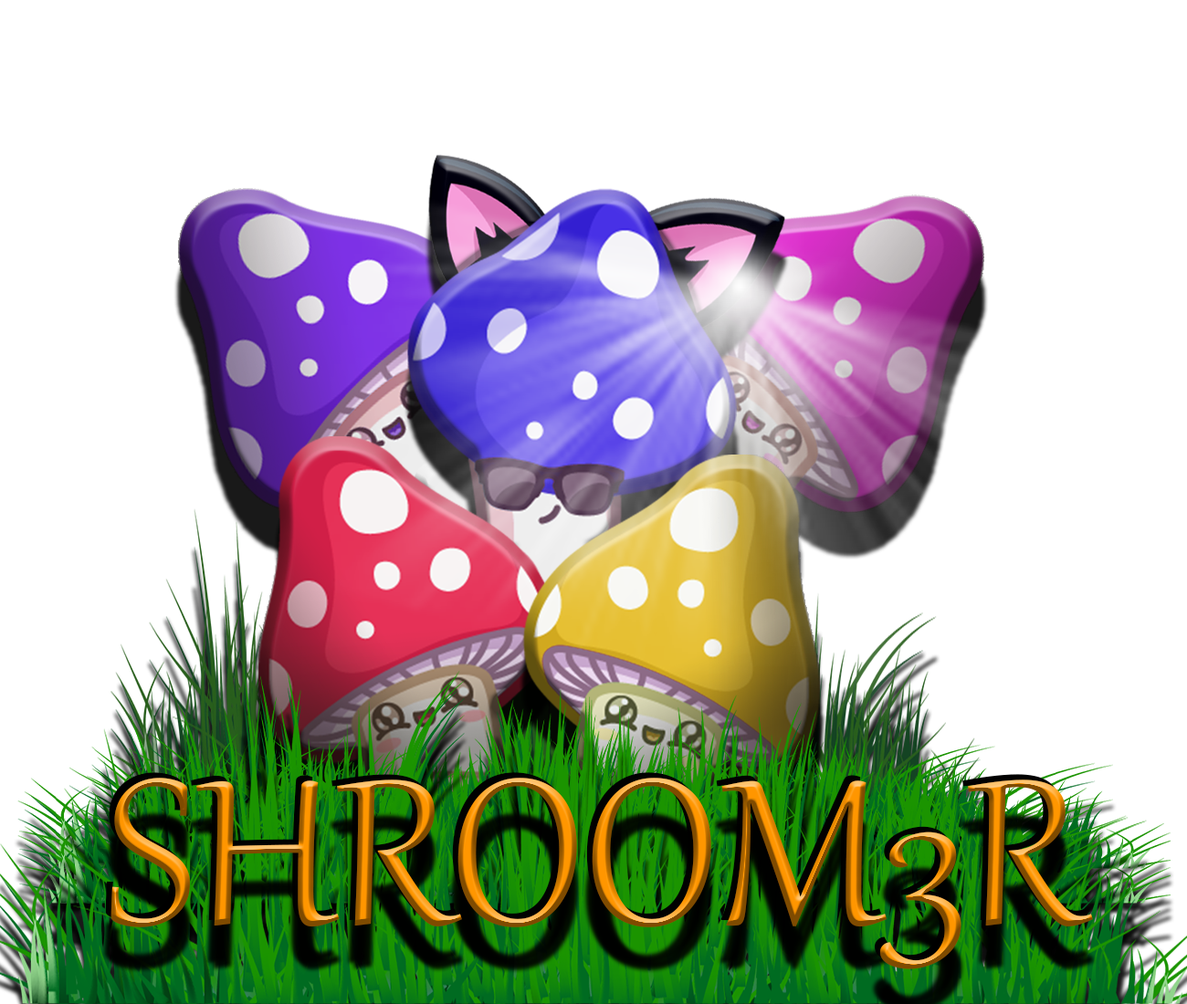
<style>
.page{position:relative;width:1187px;height:1004px;background:#ffffff}
.page>*{position:absolute;margin:0}
.t1{font:254px "Gabriola"}
</style>
<div class="page">
<p class="t1" style="left:105px;top:773px;width:983px;height:191px">SHROOM3R</p>
<p class="t1" style="left:110px;top:778px;width:983px;height:192px">SHROOM3R</p>
</div>
